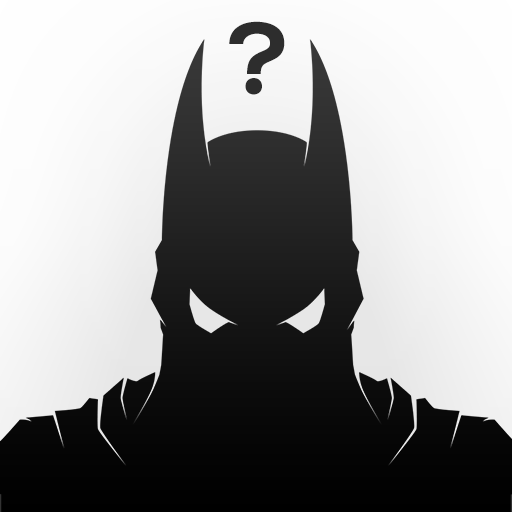
<style>
.page{position:relative;width:512px;height:512px}
.page>*{position:absolute;margin:0}
.t1{font:102.4px "NexaBold";color:#2d2d2d}
</style>
<div class="page">
<p class="t1" style="left:229px;top:21px;width:56px;height:74px">?</p>
</div>
